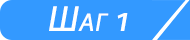
<style>
.page{position:relative;width:190px;height:40px;background:#3399ff}
.page>*{position:absolute;margin:0}
.t1{font:36px "MyriadPro-Regular";color:#ffffff;font-variant:small-caps;font-weight:bold;font-style:italic}
</style>
<div class="page">
<p class="t1" style="left:49px;top:6px;width:79px;height:25px">Шаг 1</p>
</div>
